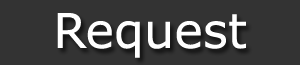
<style>
.page{position:relative;width:300px;height:65px;background:#333333}
.page>*{position:absolute;margin:0}
.t1{font:48px "Verdana";color:#ffffff}
</style>
<div class="page">
<p class="t1" style="left:57px;top:13px;width:189px;height:45px">Request</p>
</div>
